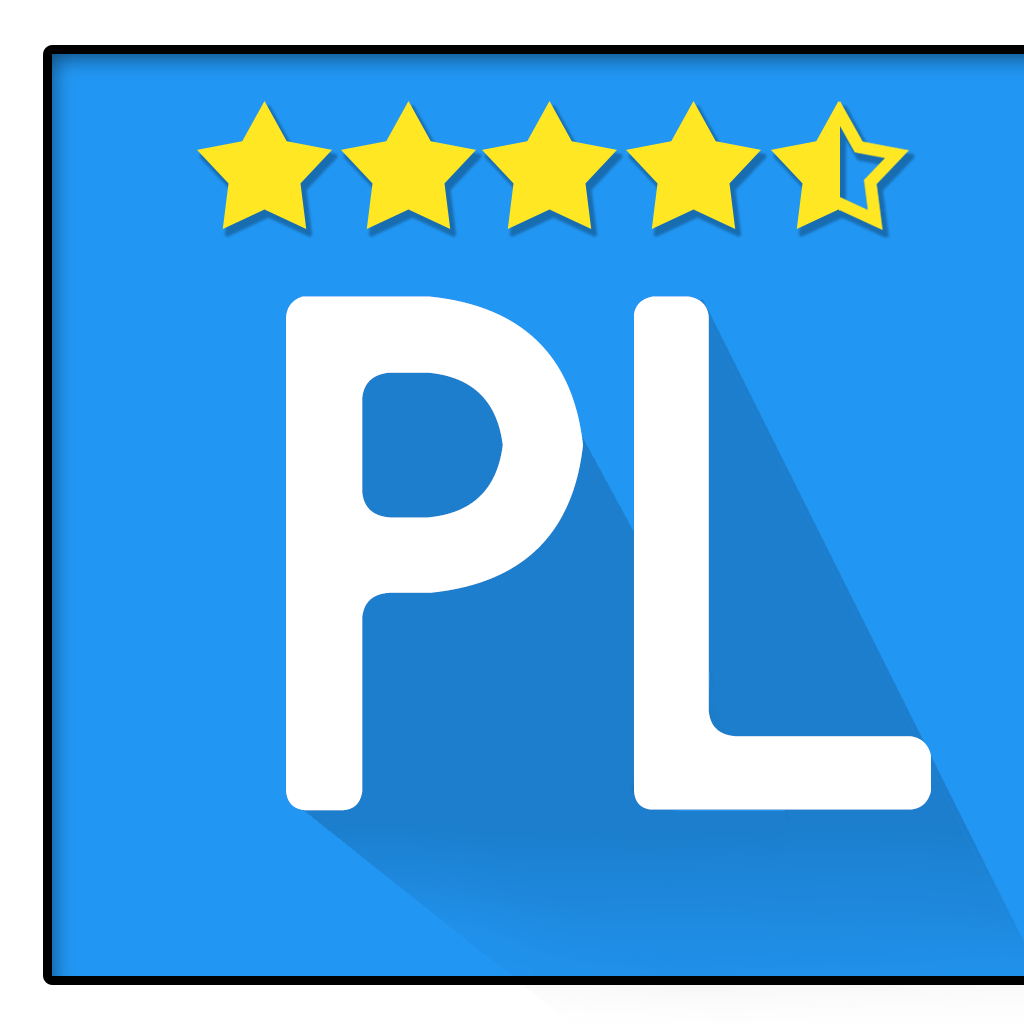
<style>
.page{position:relative;width:1024px;height:1024px;background:#2196f3}
.page>*{position:absolute;margin:0}
.t1{font:700px "PTF-NORDIC-Round-Light";color:#ffffff}
</style>
<div class="page">
<p class="t1" style="left:286px;top:296px;width:645px;height:515px">PL</p>
</div>
